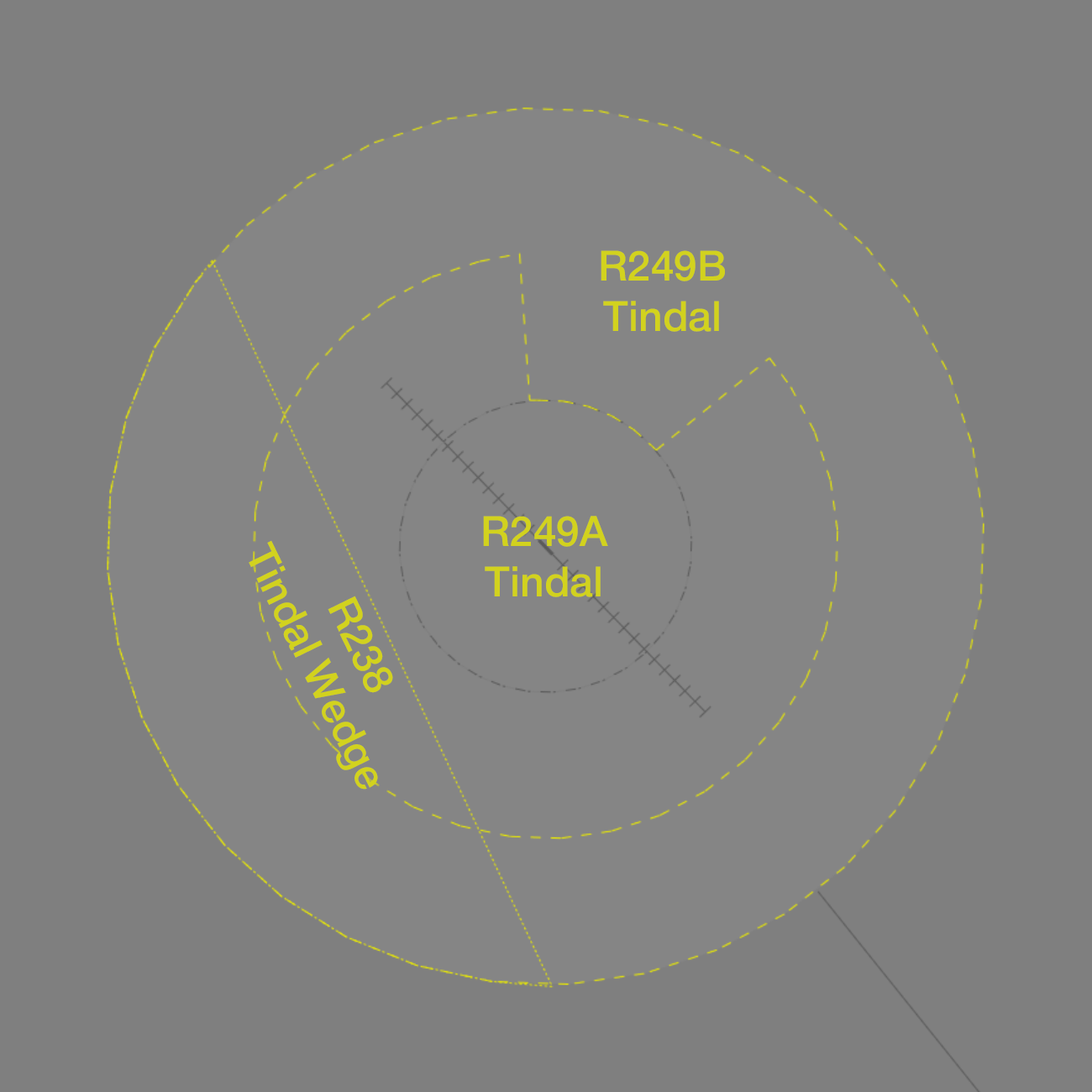
<style>
.page{position:relative;width:1092px;height:1092px;background:#7f7f7f}
.page>*{position:absolute;margin:0}
.t1{font:42px "HelveticaNeue-Medium";color:#d2d21e}
</style>
<div class="page">
<p class="t1" style="left:601px;top:250px;width:124px;height:82px;text-align:center">R249B<br>Tindal</p>
<p class="t1" style="left:483px;top:516px;width:125px;height:81px;text-align:center">R249A<br>Tindal</p>
<p class="t1" style="left:249px;top:540px;width:144px;height:250px;text-align:center;rotate:64deg">R238<br>Tindal Wedge</p>
</div>
